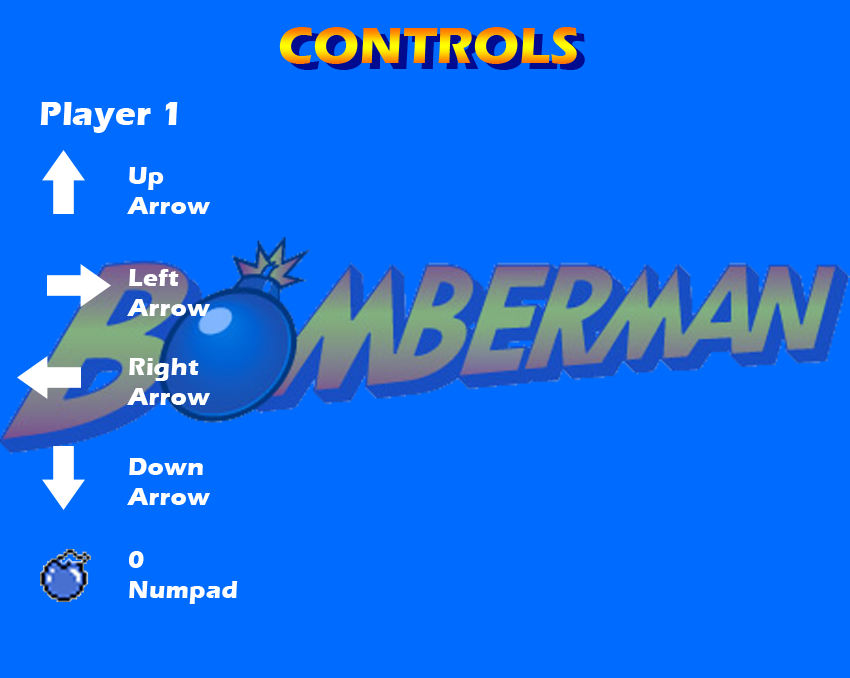
<style>
.page{position:relative;width:850px;height:678px;background:#006cff}
.page>*{position:absolute;margin:0}
.t1{font:52.9px "ErasITC-Bold"}
.t2{font:35.3px "ErasITC-Bold";color:#ffffff}
.t3{font:25.4px "ErasITC-Bold";color:#ffffff}
</style>
<div class="page">
<p class="t1" style="left:279px;top:27px;width:298px;height:37px">CONTROLS</p>
<p class="t2" style="left:40px;top:102px;width:138px;height:31px">Player 1</p>
<p class="t3" style="left:127px;top:167px;width:83px;height:47px">Up <br>Arrow</p>
<p class="t3" style="left:127px;top:269px;width:83px;height:47px">Left Arrow</p>
<p class="t3" style="left:127px;top:358px;width:83px;height:47px">Right<br>Arrow</p>
<p class="t3" style="left:127px;top:458px;width:83px;height:47px">Down<br>Arrow</p>
<p class="t3" style="left:129px;top:551px;width:109px;height:53px">0 Numpad</p>
</div>
